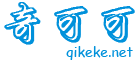
<style>
.page{position:relative;width:140px;height:60px;background:#ffffff}
.page>*{position:absolute;margin:0}
.t1{font:46px "»³Á¼ÐÐÊé¿ÕÐÄÌå";color:#0091db;font-weight:bold}
.t2{font:14px "ComicSansMS";color:#0091db}
</style>
<div class="page">
<p class="t1" style="left:4px;top:2px;width:131px;height:43px">奇可可</p>
<p class="t2" style="left:66px;top:46px;width:67px;height:15px">qikeke.net</p>
</div>
